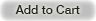
<style>
.page{position:relative;width:96px;height:21px}
.page>*{position:absolute;margin:0}
.t1{font:12px "HelveticaNeue-Medium";color:#222222}
</style>
<div class="page">
<p class="t1" style="left:15px;top:5px;width:65px;height:9px">Add to Cart</p>
</div>
